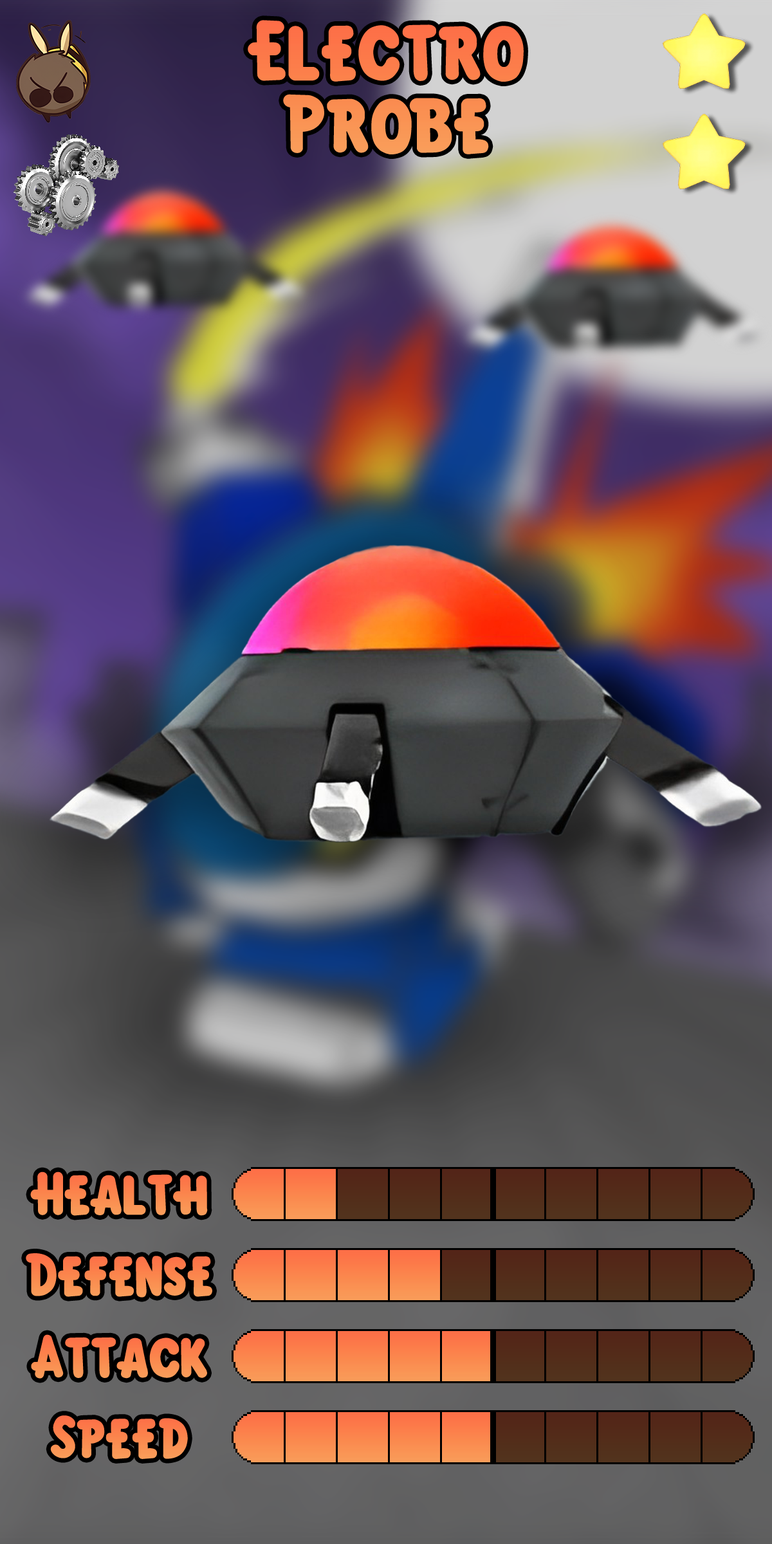
<style>
.page{position:relative;width:772px;height:1544px}
.page>*{position:absolute;margin:0}
.t1{font:128.7px/72.7px "KirbyClassic";color:#fc804b}
.t2{font:92.7px "KirbyClassic";color:#fb884e}
.t3{font:92.7px "KirbyClassic";color:#fb864e}
.t4{font:92.7px "KirbyClassic";color:#fb854c}
</style>
<div class="page">
<p class="t1" style="left:248px;top:20px;width:276px;height:134px;text-align:center">Electro<br>Probe</p>
<p class="t2" style="left:30px;top:1172px;width:178px;height:44px">Health</p>
<p class="t3" style="left:26px;top:1253px;width:186px;height:45px">Defense</p>
<p class="t2" style="left:31px;top:1335px;width:176px;height:44px">Attack</p>
<p class="t4" style="left:50px;top:1416px;width:138px;height:43px">Speed</p>
</div>
